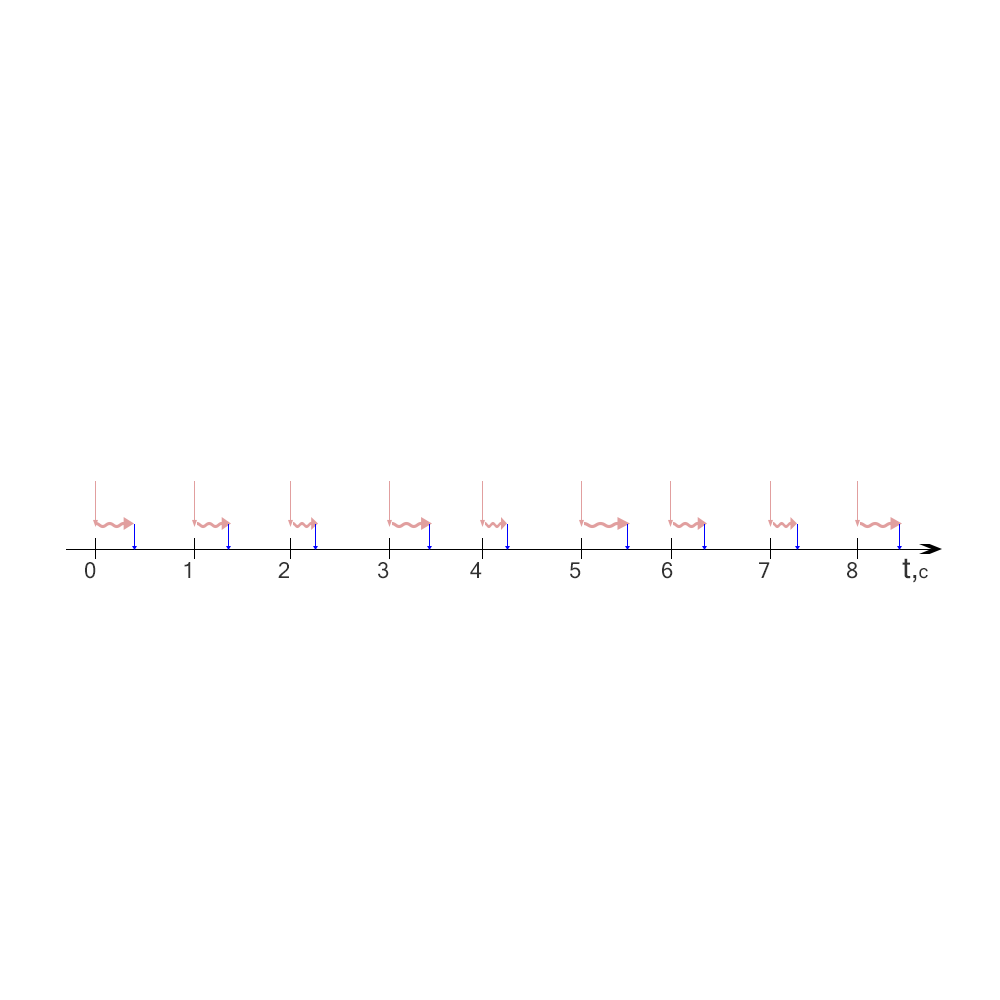
<style>
.page{position:relative;width:1000px;height:1000px;background:#ffffff}
.page>*{position:absolute;margin:0}
.t1{font:30px "MicrosoftSansSerif";color:#313131}
.t2{font:19px "MicrosoftSansSerif";color:#313131}
.t3{font:22px "MicrosoftSansSerif";color:#313131}
</style>
<div class="page">
<p class="t1" style="left:902px;top:558px;width:26px;height:25px">t,<span class="t2">c</span></p>
<p class="t3" style="left:85px;top:562px;width:11px;height:17px">0</p>
<p class="t3" style="left:184px;top:562px;width:7px;height:16px">1</p>
<p class="t3" style="left:278px;top:562px;width:11px;height:16px">2</p>
<p class="t3" style="left:378px;top:562px;width:11px;height:17px">3</p>
<p class="t3" style="left:470px;top:562px;width:12px;height:16px">4</p>
<p class="t3" style="left:570px;top:562px;width:11px;height:17px">5</p>
<p class="t3" style="left:662px;top:562px;width:11px;height:17px">6</p>
<p class="t3" style="left:759px;top:562px;width:11px;height:16px">7</p>
<p class="t3" style="left:847px;top:562px;width:11px;height:17px">8</p>
</div>
